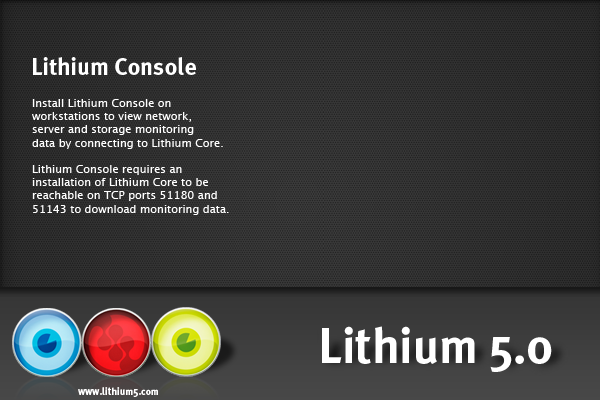
<style>
.page{position:relative;width:600px;height:400px}
.page>*{position:absolute;margin:0}
.t1{font:24px "MetaPlusBold-Roman";color:#ffffff}
.t2{font:11px "LucidaGrande";color:#ffffff}
.t3{font:49.3px "MetaPlusBold-Roman";color:#ffffff}
.t4{font:10.2px "MetaPlusBold-Roman";color:#ffffff}
</style>
<div class="page">
<p class="t1" style="left:33px;top:57px;width:163px;height:18px">Lithium Console</p>
<p class="t2" style="left:32px;top:99px;width:197px;height:116px">Install Lithium Console on <br>workstations to view network, <br>server and storage monitoring<br>data by connecting to Lithium Core.<br><br>Lithium Console requires an <br>installation of Lithium Core to be<br>reachable on TCP ports 51180 and<br>51143 to download monitoring data.</p>
<p class="t3" style="left:322px;top:326px;width:230px;height:46px">Lithium 5.0</p>
<p class="t4" style="left:78px;top:387px;width:80px;height:10px">www.lithium5.com</p>
</div>
